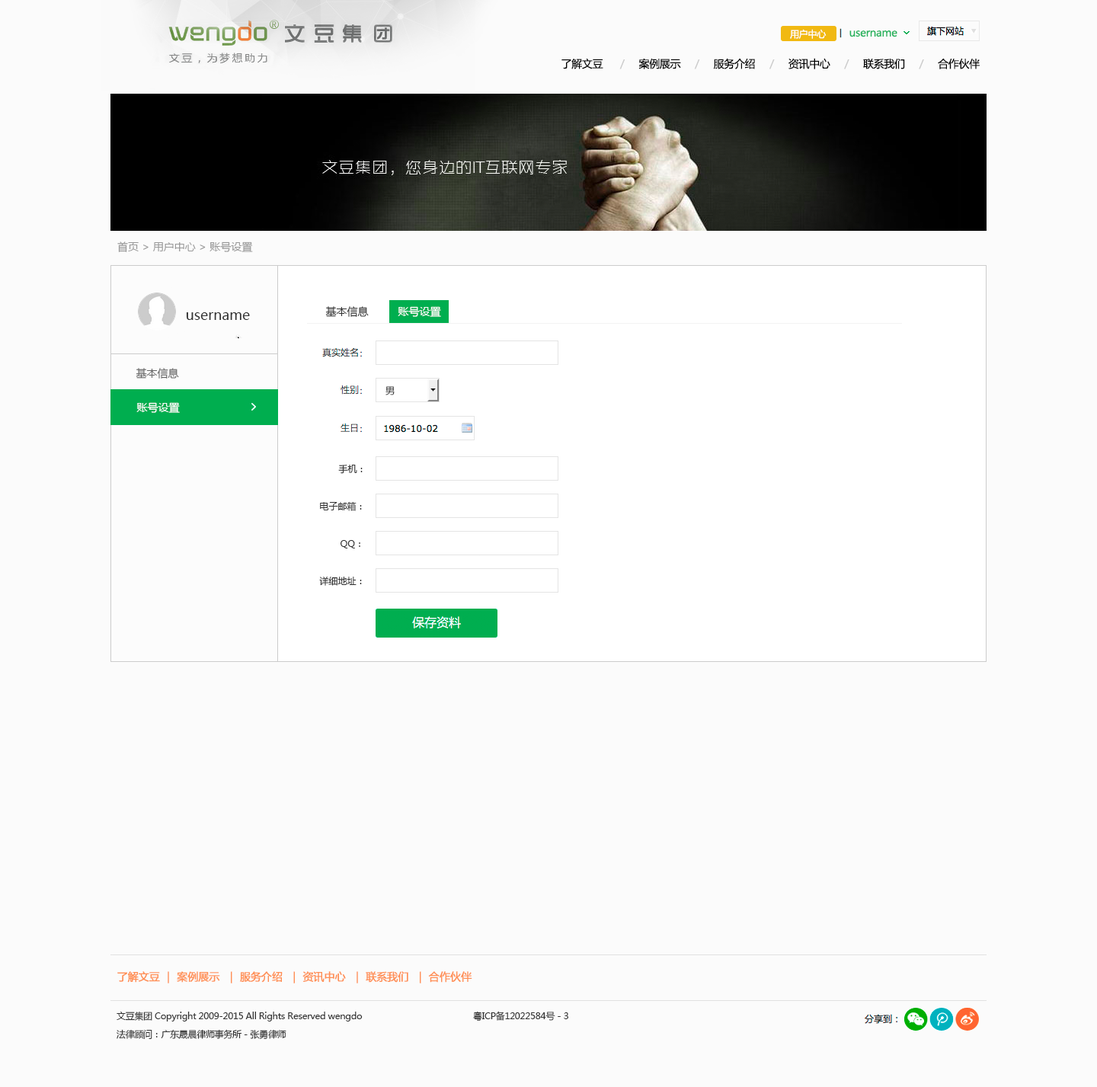
<style>
.page{position:relative;width:1097px;height:1087px;background:#fbfbfb}
.page>*{position:absolute;margin:0}
.t1{font:9.1px "MicrosoftYaHei";letter-spacing:-0.025em;color:#fefefe}
.t2{font:10.7px "MicrosoftYaHei";letter-spacing:-0.025em;color:#23b35c}
.t3{font:10.7px "MicrosoftYaHei";letter-spacing:-0.025em;color:#010101}
.t4{font:10.7px "MicrosoftYaHei";letter-spacing:-0.025em;color:#cccccc}
.t5{font:10.7px "MicrosoftYaHei";color:#999999}
.t6{font:13.7px "MicrosoftYaHei";color:#333333}
.t7{font:10.7px "MicrosoftYaHei";color:#333333}
.t8{font:10.7px "MicrosoftYaHei";color:#ffffff}
.t9{font:10.7px "MicrosoftYaHei";color:#666666}
.t10{font:9.1px "MicrosoftYaHei";color:#333333}
.t11{font:10.7px "MicrosoftYaHei";letter-spacing:-0.025em;color:#ff8f54;font-weight:bold}
.t12{font:9.1px/18.3px "MicrosoftYaHei";letter-spacing:-0.025em;color:#333333}
</style>
<div class="page">
<p class="t1" style="left:790px;top:29px;width:37px;height:10px">用户中心</p>
<p class="t2" style="left:849px;top:30px;width:48px;height:7px">username</p>
<p class="t3" style="left:561px;top:58px;width:419px;height:11px">了解文豆      <span class="t4">/     </span>案例展示     <span class="t4">/     </span>服务介绍     <span class="t4">/     </span>资讯中心     <span class="t4">/     </span>联系我们     <span class="t4">/     </span>合作伙伴</p>
<p class="t5" style="left:117px;top:241px;width:136px;height:11px">首页 &gt; 用户中心 &gt; 账号设置</p>
<p class="t6" style="left:186px;top:312px;width:64px;height:8px">username</p>
<p class="t7" style="left:325px;top:306px;width:44px;height:11px">基本信息</p>
<p class="t8" style="left:398px;top:306px;width:43px;height:11px">账号设置</p>
<p class="t9" style="left:136px;top:368px;width:43px;height:11px">基本信息</p>
<p class="t10" style="left:385px;top:386px;width:10px;height:9px">男</p>
<p class="t8" style="left:136px;top:402px;width:44px;height:11px">账号设置</p>
<p class="t10" style="left:338px;top:465px;width:25px;height:9px">手机：</p>
<p class="t10" style="left:320px;top:501px;width:42px;height:10px">电子邮箱：</p>
<p class="t10" style="left:341px;top:540px;width:19px;height:8px">QQ：</p>
<p class="t10" style="left:319px;top:577px;width:43px;height:9px">详细地址：</p>
<p class="t11" style="left:117px;top:971px;width:355px;height:12px">了解文豆 ｜ 案例展示  ｜ 服务介绍  ｜ 资讯中心  ｜ 联系我们  ｜ 合作伙伴</p>
<p class="t12" style="left:117px;top:1011px;width:451px;height:28px">文豆集团 Copyright 2009-2015 All Rights Reserved wengdo     粤ICP备12022584号－3<br>法律顾问：广东晟晨律师事务所－张勇律师</p>
</div>
